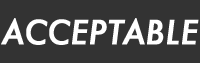
<style>
.page{position:relative;width:200px;height:63px;background:#333333}
.page>*{position:absolute;margin:0}
.t1{font:32.3px "Futura-MediumItalic";color:#ffffff;text-transform:uppercase;font-weight:bold}
</style>
<div class="page">
<p class="t1" style="left:1px;top:18px;width:198px;height:27px">Acceptable</p>
</div>
